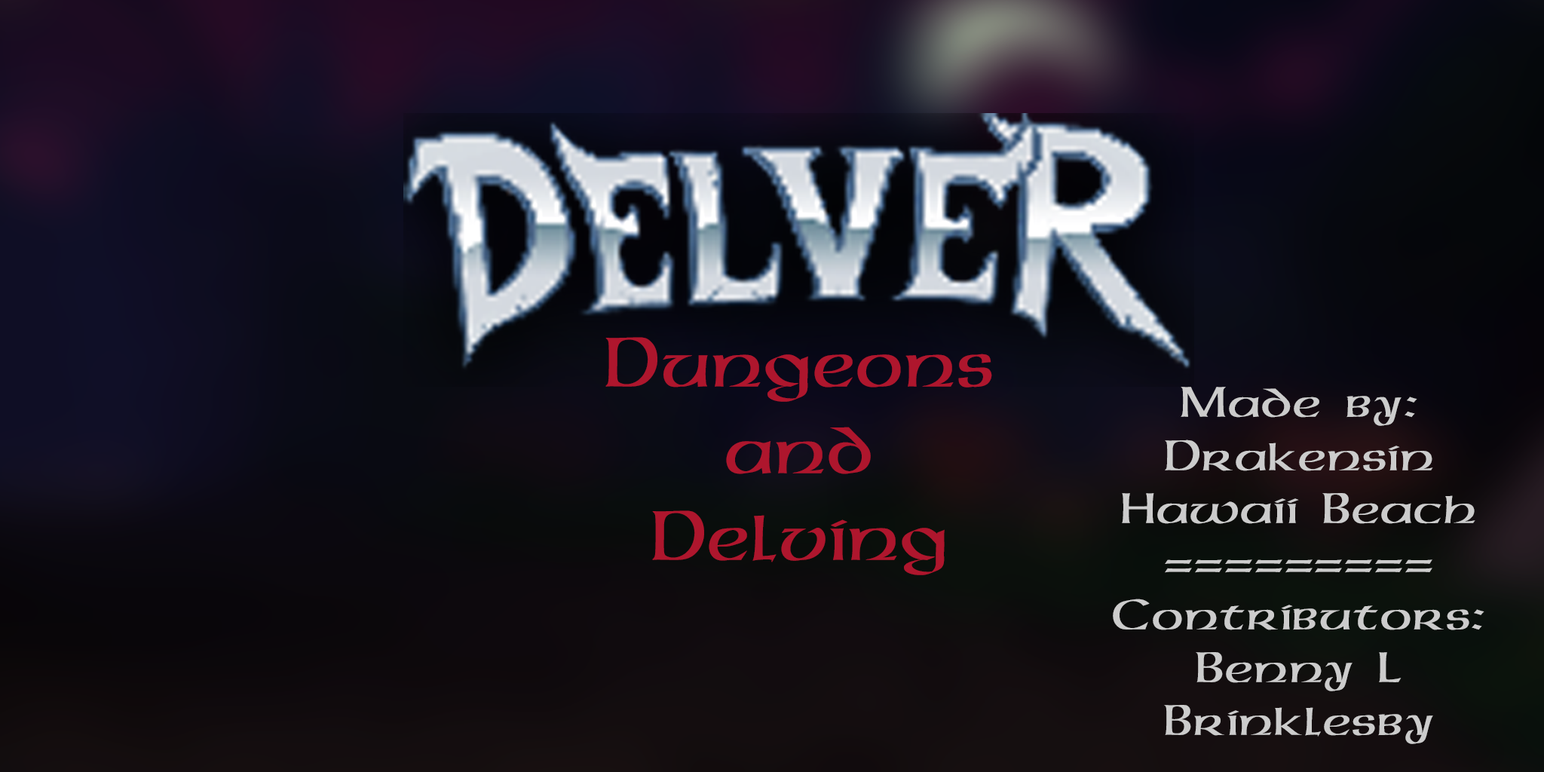
<style>
.page{position:relative;width:1544px;height:772px}
.page>*{position:absolute;margin:0}
.t1{font:72.4px "DalelandsUncial";color:#ae162d}
.t2{font:44.2px "DalelandsUncial";color:#cccccc;scale:1.09 1}
</style>
<div class="page">
<p class="t1" style="left:606px;top:337px;width:386px;height:238px;text-align:center">Dungeons<br>and<br>Delving</p>
<p class="t2" style="left:1113px;top:387px;width:372px;height:357px;text-align:center">Made by:<br>Drakensin<br>Hawaii Beach<br>=========<br>Contributors:<br>Benny L<br>Brinklesby</p>
</div>
